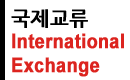
<style>
.page{position:relative;width:130px;height:80px;background:#ffffff}
.page>*{position:absolute;margin:0}
.t1{font:20px/24px "Arial-BoldMT";color:#dc241f;font-weight:bold;scale:0.9 1}
.t2{font:20px/24px "NanumGothicBold";color:#000000;font-weight:bold}
</style>
<div class="page">
<p class="t1" style="left:11px;top:9px;width:113px;height:68px"><span class="t2">국제교류<br></span>International<br>Exchange</p>
</div>
